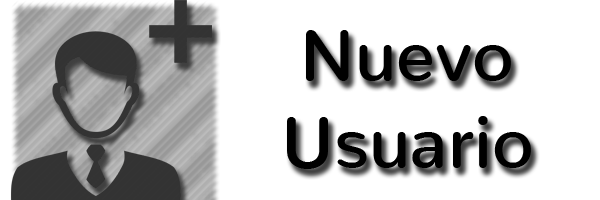
<style>
.page{position:relative;width:600px;height:200px;background:#ffffff}
.page>*{position:absolute;margin:0}
.t1{font:72px "Nunito-SemiBold";color:#000000}
</style>
<div class="page">
<p class="t1" style="left:287px;top:30px;width:244px;height:139px;text-align:center">Nuevo<br>Usuario</p>
</div>
